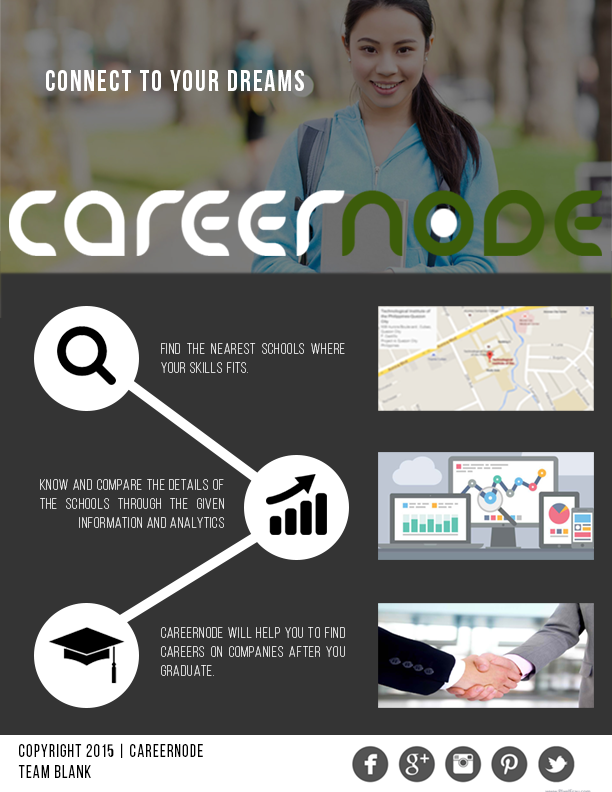
<style>
.page{position:relative;width:612px;height:792px;background:#343434}
.page>*{position:absolute;margin:0}
.t1{font:30px "BebasNeueBold";letter-spacing:0.075em;color:#ffffff;scale:0.9 1}
.t2{font:15.9px "BebasNeue-Thin";letter-spacing:0.075em;color:#ffffff;scale:0.9 1}
.t3{font:18px "BebasNeueRegular";letter-spacing:0.075em;color:#000000;scale:0.9 1}
</style>
<div class="page">
<p class="t1" style="left:46px;top:70px;width:258px;height:21px">Connect to your dreams</p>
<p class="t2" style="left:161px;top:343px;width:184px;height:30px;text-align:justify">find the nearest schools where<br>your skills fits.</p>
<p class="t2" style="left:40px;top:479px;width:184px;height:49px;text-align:justify">know and compare the details of the schools through the given <br>information and analytics</p>
<p class="t2" style="left:161px;top:627px;width:184px;height:49px;text-align:justify">careernode will help you to find careers on companies after you <br>graduate.</p>
<p class="t3" style="left:18px;top:743px;width:185px;height:35px">copyright 2015 | careernode<br>Team blank</p>
</div>
